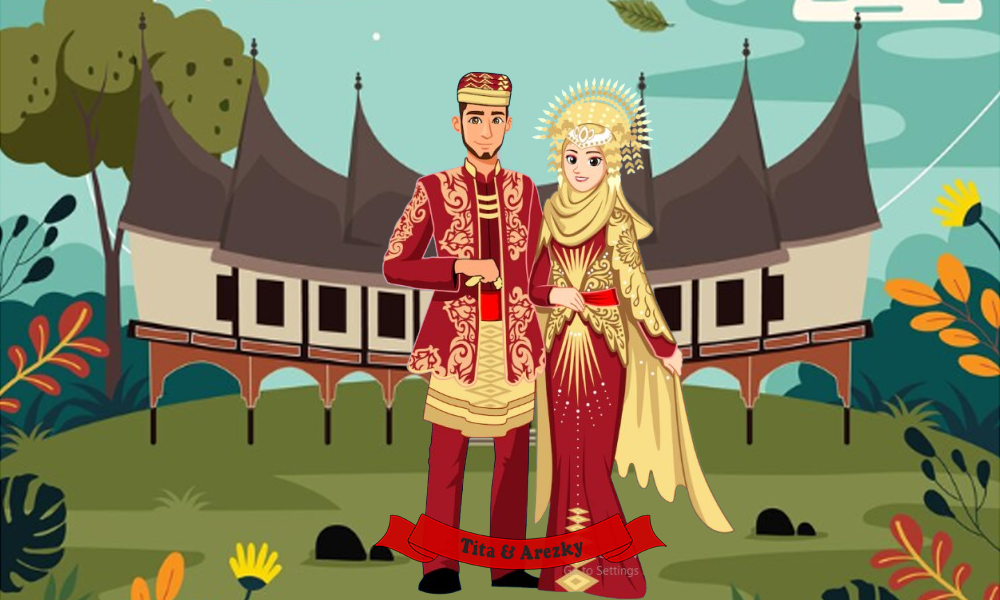
<style>
.page{position:relative;width:1000px;height:600px}
.page>*{position:absolute;margin:0}
.t1{font:16px "CooperBlack";color:#2d2121}
</style>
<div class="page">
<p class="t1" style="left:460px;top:537px;width:123px;height:23px">Tita &amp; Arezky</p>
</div>
